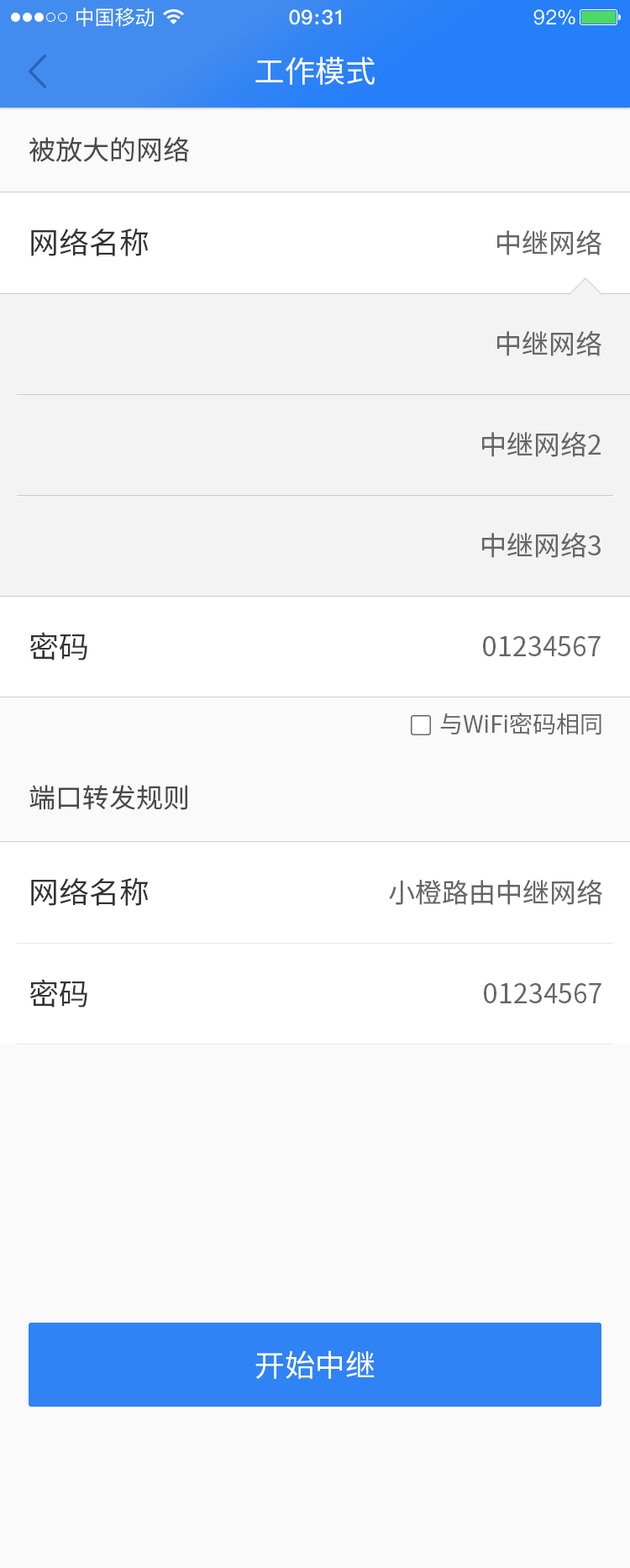
<style>
.page{position:relative;width:630px;height:1568px;background:#fafafa}
.page>*{position:absolute;margin:0}
.t1{font:30.3px "SourceHanSansCN-Regular";color:#ffffff}
.t2{font:26.9px "SourceHanSansCN-Regular";color:#494949}
.t3{font:30.3px "SourceHanSansCN-Regular";color:#333333}
.t4{font:26.9px "SourceHanSansCN-Regular";color:#666666}
.t5{font:23.5px "SourceHanSansCN-Regular";color:#666666}
</style>
<div class="page">
<p class="t1" style="left:255px;top:56px;width:120px;height:29px">工作模式</p>
<p class="t2" style="left:29px;top:136px;width:160px;height:26px">被放大的网络</p>
<p class="t3" style="left:31px;top:228px;width:118px;height:28px">网络名称</p>
<p class="t4" style="left:497px;top:229px;width:105px;height:26px">中继网络</p>
<p class="t4" style="left:497px;top:330px;width:105px;height:26px">中继网络</p>
<p class="t4" style="left:482px;top:431px;width:119px;height:26px">中继网络2</p>
<p class="t4" style="left:482px;top:532px;width:119px;height:26px">中继网络3</p>
<p class="t3" style="left:29px;top:632px;width:58px;height:28px">密码</p>
<p class="t4" style="left:483px;top:636px;width:118px;height:20px">01234567</p>
<p class="t5" style="left:440px;top:713px;width:162px;height:22px">与WiFi密码相同</p>
<p class="t2" style="left:29px;top:785px;width:158px;height:25px">端口转发规则</p>
<p class="t3" style="left:31px;top:877px;width:118px;height:29px">网络名称</p>
<p class="t4" style="left:389px;top:879px;width:213px;height:26px">小橙路由中继网络</p>
<p class="t3" style="left:29px;top:979px;width:58px;height:29px">密码</p>
<p class="t4" style="left:484px;top:983px;width:118px;height:20px">01234567</p>
<p class="t1" style="left:255px;top:1350px;width:120px;height:29px">开始中继</p>
</div>
